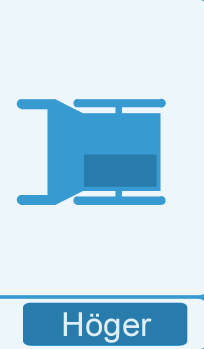
<style>
.page{position:relative;width:204px;height:349px;background:#ecf6fb}
.page>*{position:absolute;margin:0}
.t1{font:33px "ArialMT";color:#dfeff8}
</style>
<div class="page">
<p class="t1" style="left:63px;top:312px;width:89px;height:31px">Höger</p>
</div>
